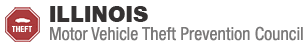
<style>
.page{position:relative;width:306px;height:50px;background:#ffffff}
.page>*{position:absolute;margin:0}
.t1{font:22px "HelveticaNeueLT-Black";color:#353232}
.t2{font:8px "HelveticaLT-Condensed-Black";color:#ffffff}
.t3{font:18px "HelveticaNeueLT-Condensed";color:#797878}
</style>
<div class="page">
<p class="t1" style="left:50px;top:6px;width:98px;height:16px">ILLINOIS</p>
<p class="t2" style="left:12px;top:26px;width:20px;height:6px">THEFT</p>
<p class="t3" style="left:50px;top:26px;width:253px;height:15px">Motor Vehicle Theft Prevention Council</p>
</div>
